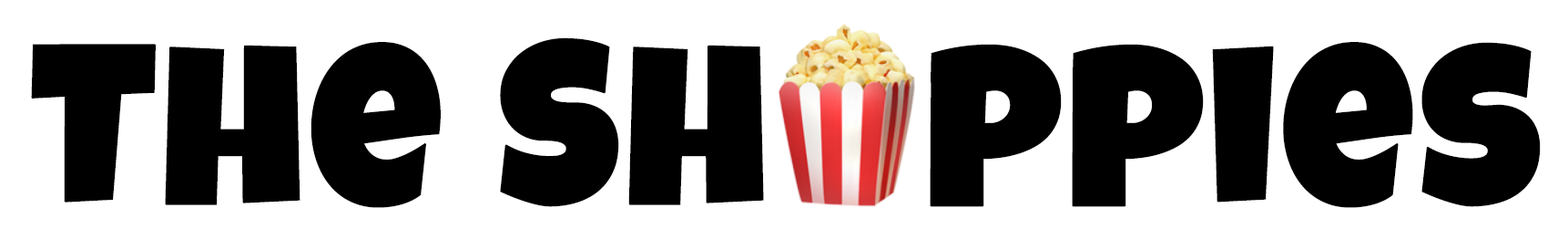
<style>
.page{position:relative;width:1568px;height:239px;background:#ffffff}
.page>*{position:absolute;margin:0}
.t1{font:227.6px "LuckiestGuy-Regular";color:#000000;font-weight:bold}
</style>
<div class="page">
<p class="t1" style="left:31px;top:37px;width:1510px;height:171px">The Shoppies</p>
</div>
